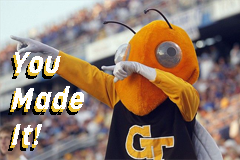
<style>
.page{position:relative;width:240px;height:160px}
.page>*{position:absolute;margin:0}
.t1{font:30px "Korolev-BoldItalic";letter-spacing:0.05em;color:#ffffff}
.t2{font:30px "Korolev-BoldItalic";letter-spacing:0.05em}
</style>
<div class="page">
<p class="t1" style="left:12px;top:52px;width:72px;height:93px">You Made It!</p>
<p class="t2" style="left:10px;top:55px;width:72px;height:93px">You Made It!</p>
</div>
